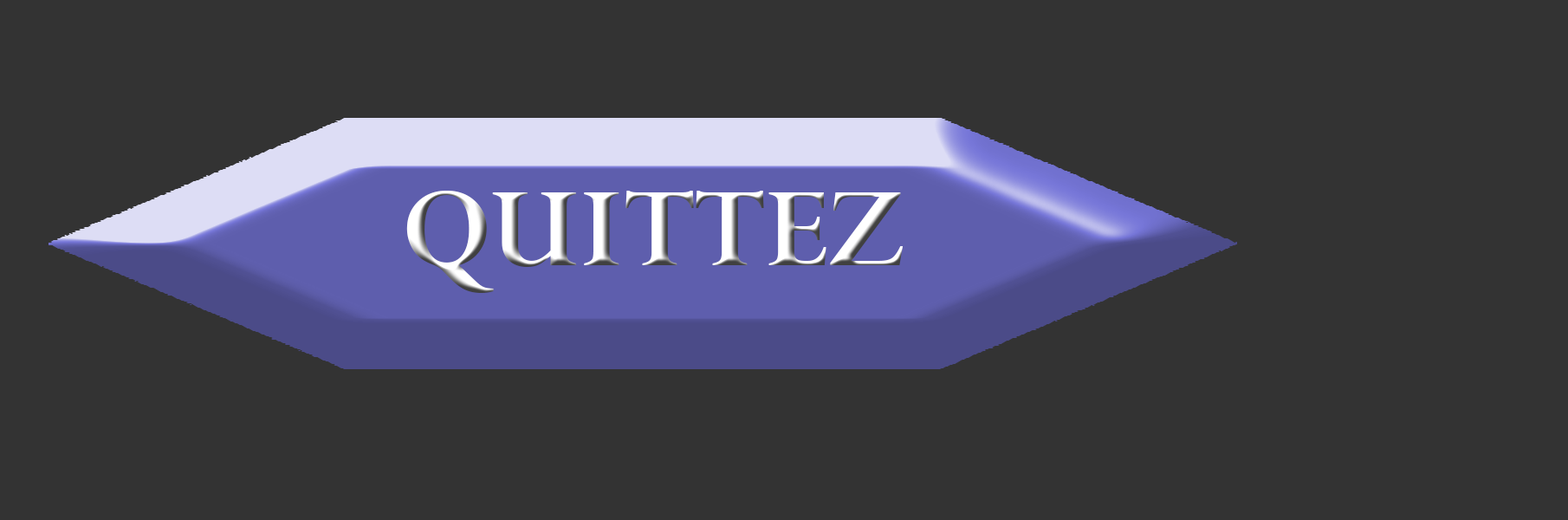
<style>
.page{position:relative;width:1568px;height:520px;background:#333333}
.page>*{position:absolute;margin:0}
.t1{font:124.7px "Perpetua-Bold"}
</style>
<div class="page">
<p class="t1" style="left:406px;top:191px;width:498px;height:102px">QUITTEZ</p>
</div>
